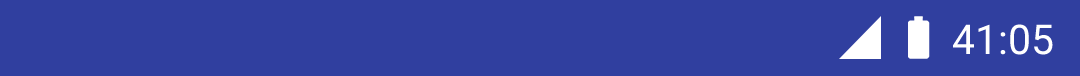
<style>
.page{position:relative;width:1080px;height:76px;background:#303f9f}
.page>*{position:absolute;margin:0}
.t1{font:41px "Roboto-Regular";color:#ffffff}
</style>
<div class="page">
<p class="t1" style="left:953px;top:24px;width:100px;height:31px">41:05</p>
</div>
